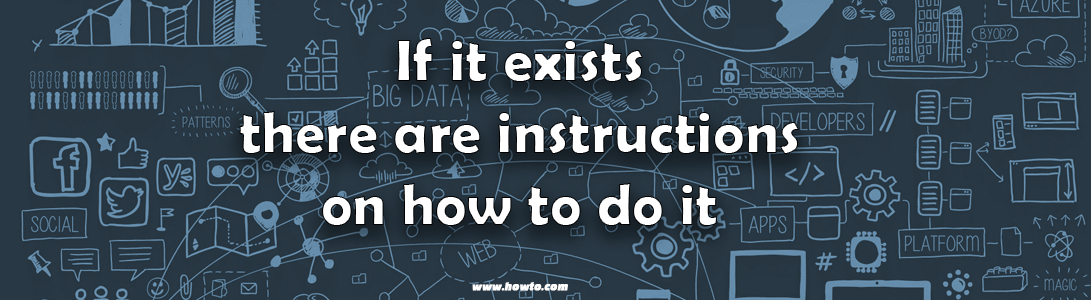
<style>
.page{position:relative;width:1091px;height:300px}
.page>*{position:absolute;margin:0}
.t1{font:60px "BerlinSansFBDemi-Bold";color:#ffffff}
.t2{font:10px "BlackHanSans-Regular";color:#ffffff;font-weight:bold;font-style:italic}
</style>
<div class="page">
<p class="t1" style="left:239px;top:38px;width:560px;height:188px;text-align:center">If it exists <br>there are instructions <br>on how to do it</p>
<p class="t2" style="left:472px;top:282px;width:96px;height:9px">www.howto.com</p>
</div>
